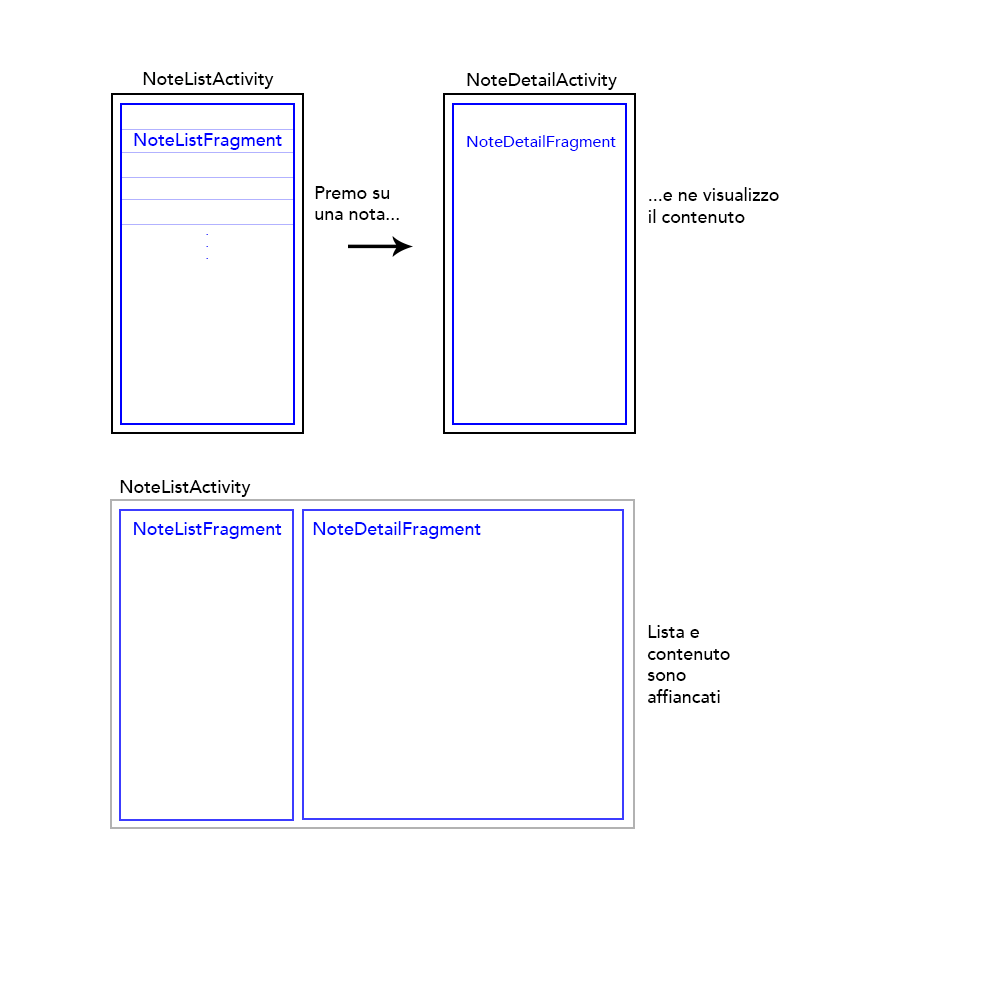
<style>
.page{position:relative;width:1000px;height:1000px;background:#ffffff}
.page>*{position:absolute;margin:0}
.t1{font:18px "Avenir-Medium";color:#000100}
.t2{font:18px "Avenir-Medium";color:#000000}
.t3{font:18px "Avenir-Medium";color:#0000ff}
.t4{font:16px "Avenir-Medium";color:#0000ff}
.t5{font:10px "Avenir-Medium"}
.t6{font:18px "Avenir-Medium";color:#0007ff}
</style>
<div class="page">
<p class="t1" style="left:143px;top:72px;width:131px;height:17px">NoteListActivity</p>
<p class="t2" style="left:467px;top:72px;width:150px;height:18px">NoteDetailActivity</p>
<p class="t3" style="left:134px;top:133px;width:148px;height:17px">NoteListFragment</p>
<p class="t4" style="left:467px;top:135px;width:149px;height:16px">NoteDetailFragment</p>
<p class="t2" style="left:315px;top:186px;width:84px;height:34px">Premo su<br>una nota...</p>
<p class="t2" style="left:648px;top:187px;width:131px;height:36px">...e ne visualizzo<br>il contenuto</p>
<p class="t5" style="left:206px;top:234px;width:2px;height:25px">.<br>.<br>.</p>
<p class="t2" style="left:120px;top:480px;width:131px;height:17px">NoteListActivity</p>
<p class="t6" style="left:313px;top:521px;width:168px;height:18px">NoteDetailFragment</p>
<p class="t6" style="left:134px;top:522px;width:148px;height:17px">NoteListFragment</p>
<p class="t2" style="left:647px;top:625px;width:83px;height:78px">Lista e<br>contenuto<br>sono<br>affiancati</p>
</div>
